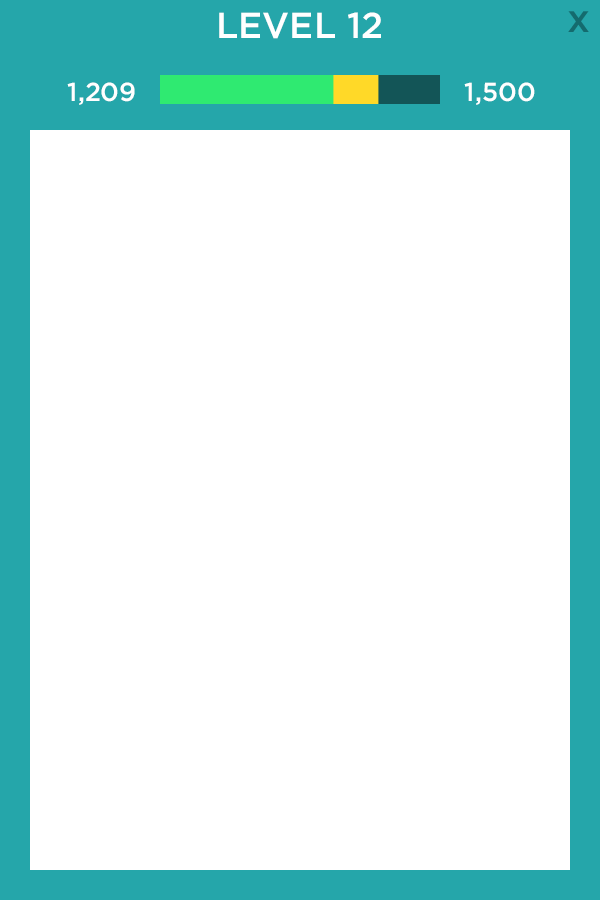
<style>
.page{position:relative;width:600px;height:900px;background:#ffffff}
.page>*{position:absolute;margin:0}
.t1{font:36px "Gotham-Medium";color:#ffffff}
.t2{font:39.4px "Gotham-Medium";color:#146b6e}
.t3{font:26px "Gotham-Medium";color:#ffffff}
</style>
<div class="page">
<p class="t1" style="left:219px;top:12px;width:162px;height:27px">LEVEL 12</p>
<p class="t2" style="left:568px;top:11px;width:21px;height:21px">x</p>
<p class="t3" style="left:67px;top:82px;width:68px;height:23px">1,209</p>
<p class="t3" style="left:464px;top:82px;width:71px;height:23px">1,500</p>
</div>
